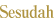
<style>
.page{position:relative;width:54px;height:19px;background:#ffffff}
.page>*{position:absolute;margin:0}
.t1{font:17px "RyuminPro-ExBold";letter-spacing:-0.04em;color:#ae9340;scale:0.9 1}
</style>
<div class="page">
<p class="t1" style="left:0px;top:5px;width:54px;height:13px">Sesudah</p>
</div>
